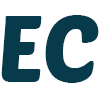
<style>
.page{position:relative;width:100px;height:100px;background:#ffffff}
.page>*{position:absolute;margin:0}
.t1{font:92.6px "PoetsenOne-Regular";color:#073b4c}
</style>
<div class="page">
<p class="t1" style="left:1px;top:15px;width:98px;height:68px">EC</p>
</div>
